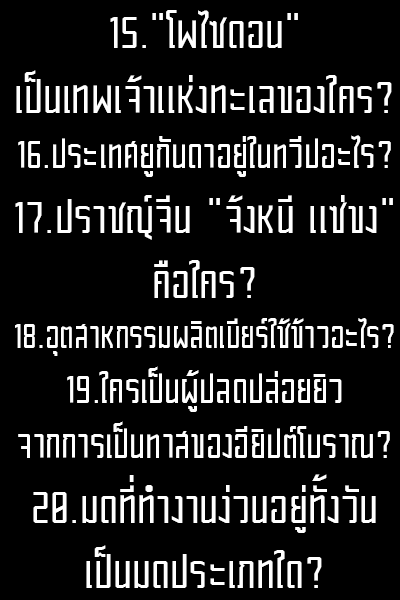
<style>
.page{position:relative;width:400px;height:600px;background:#000000}
.page>*{position:absolute;margin:0}
.t1{font:45.8px "Block-Regular";color:#ffffff}
.t2{font:54.2px "Block-Regular";color:#ffffff}
.t3{font:41.7px "Block-Regular";color:#ffffff}
</style>
<div class="page">
<p class="t1" style="left:15px;top:10px;width:379px;height:578px;text-align:center"><span class="t2">15."โพไซดอน" เป็นเทพเจ้าแห่งทะเลของใคร?<br></span>16.ประเทศยูกันดาอยู่ในทวีปอะไร?<br><span class="t2">17.ปราชญ์จีน "จ้งหนี แซ่ขง" คือใคร?<br></span><span class="t3">18.อุตสาหกรรมผลิตเบียร์ใช้ข้าวอะไร?<br></span>19.ใครเป็นผู้ปลดปล่อยยิว<br>จากการเป็นทาสของอียิปต์โบราณ?<br><span class="t2">20.มดที่ทำงานง่วนอยู่ทั้งวัน เป็นมดประเภทใด?</span></p>
</div>
